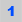
<style>
.page{position:relative;width:22px;height:22px;background:#cccccc}
.page>*{position:absolute;margin:0}
.t1{font:14px "Arial-Black";color:#004eff}
</style>
<div class="page">
<p class="t1" style="left:7px;top:6px;width:7px;height:10px">1</p>
</div>
